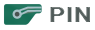
<style>
.page{position:relative;width:95px;height:30px;background:#ffffff}
.page>*{position:absolute;margin:0}
.t1{font:20.8px "Roboto-Bold";color:#4d5856;text-transform:uppercase;scale:1.2 1}
</style>
<div class="page">
<p class="t1" style="left:50px;top:7px;width:40px;height:15px">PIN</p>
</div>
